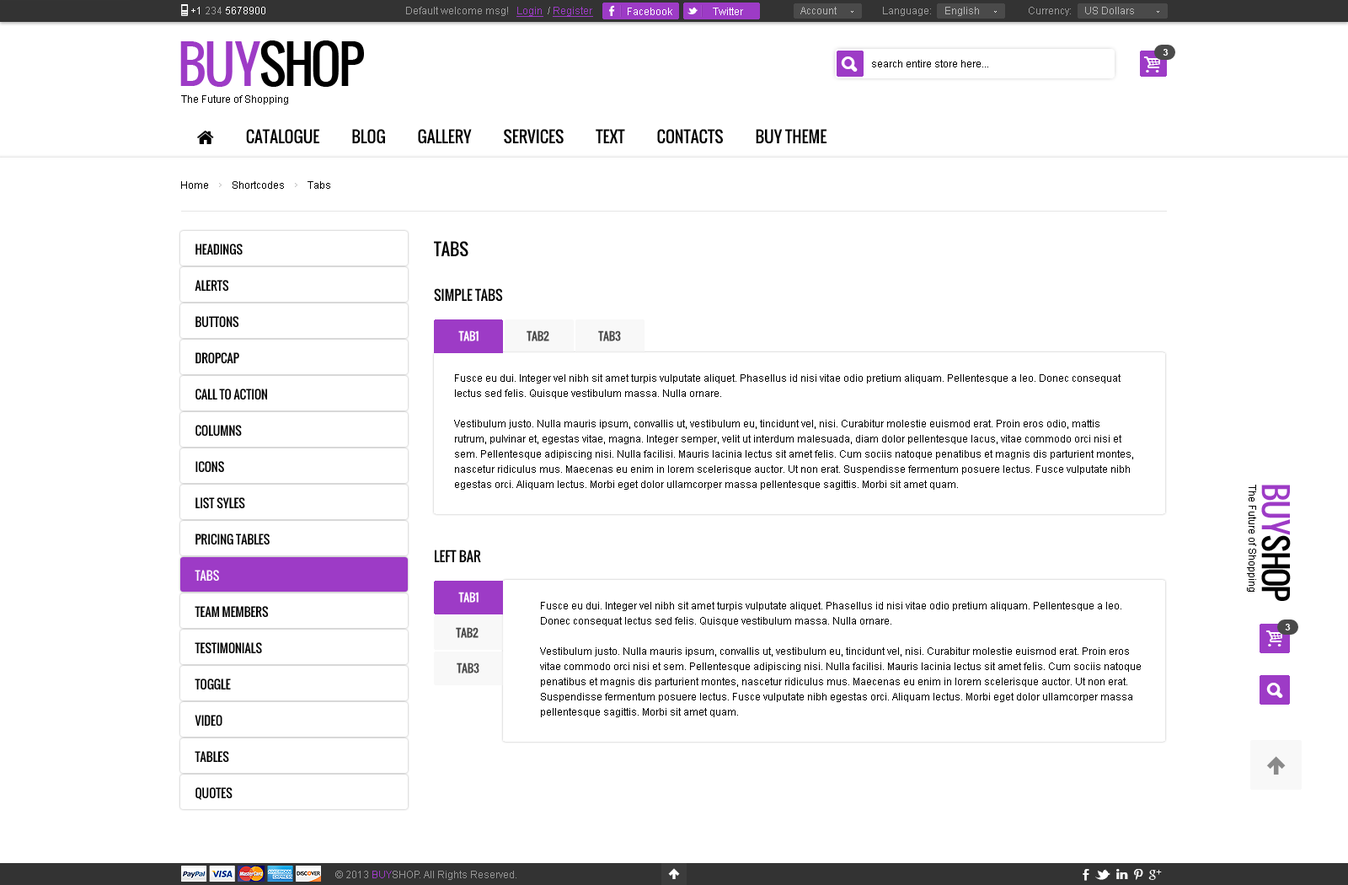
<style>
.page{position:relative;width:1348px;height:885px;background:#ffffff}
.page>*{position:absolute;margin:0}
.t1{font:10.1px "ArialMT";color:#ffffff}
.t2{font:10.1px "ArialMT";color:#9b9b9b}
.t3{font:10.1px "ArialMT";color:#9d3bc6;text-decoration:underline}
.t4{font:10.1px "ArialMT";color:#b6b6b6}
.t5{font:50.5px "Oswald";letter-spacing:-0.06em;color:#000000;text-transform:uppercase}
.t6{font:50.5px "Oswald";letter-spacing:-0.06em;color:#9d3bc6;text-transform:uppercase}
.t7{font:9.3px "Arial-BoldMT";color:#ffffff;text-transform:uppercase}
.t8{font:10.1px "ArialMT";color:#000000}
.t9{font:11.8px/36.2px "Oswald";color:#000000;text-transform:uppercase}
.t10{font:11.8px/36.2px "Oswald";color:#ffffff;text-transform:uppercase}
.t11{font:16.8px "Oswald";color:#000000;text-transform:uppercase}
.t12{font:13.5px "Oswald";color:#000000;text-transform:uppercase}
.t13{font:11px "Oswald";color:#ffffff;text-transform:uppercase}
.t14{font:11px "Oswald";color:#484848;text-transform:uppercase}
.t15{font:10.1px/15.2px "ArialMT";color:#000000}
.t16{font:32px "Oswald";letter-spacing:-0.06em;color:#000000;text-transform:uppercase}
.t17{font:32px "Oswald";letter-spacing:-0.06em;color:#9d3bc6;text-transform:uppercase}
.t18{font:10.1px "ArialMT";color:#959595}
.t19{font:10.1px "ArialMT";color:#9d3bc6}
</style>
<div class="page">
<p class="t1" style="left:191px;top:7px;width:74px;height:7px">+1 <span class="t2">234 </span>5678900</p>
<p class="t2" style="left:406px;top:7px;width:187px;height:10px">Default welcome msg!   <span class="t3">Login </span> / <span class="t3">Register</span></p>
<p class="t2" style="left:406px;top:7px;width:187px;height:10px">Default welcome msg!   <span class="t3">Login </span> / <span class="t3">Register</span></p>
<p class="t1" style="left:628px;top:8px;width:44px;height:7px">Facebook</p>
<p class="t1" style="left:713px;top:8px;width:30px;height:7px">Twitter</p>
<p class="t4" style="left:800px;top:7px;width:37px;height:7px">Account</p>
<p class="t2" style="left:883px;top:7px;width:96px;height:9px">Language:     <span class="t4">English</span></p>
<p class="t4" style="left:1029px;top:7px;width:105px;height:9px"><span class="t2">Currency:     </span>US Dollars</p>
<p class="t5" style="left:180px;top:40px;width:184px;height:47px"><span class="t6">buy</span>shop</p>
<p class="t7" style="left:1163px;top:49px;width:6px;height:7px">3</p>
<p class="t8" style="left:872px;top:60px;width:116px;height:7px">search entire store here...</p>
<p class="t8" style="left:181px;top:95px;width:107px;height:9px">The Future of Shopping</p>
<p class="t8" style="left:181px;top:181px;width:149px;height:8px">Home         Shortcodes         Tabs</p>
<p class="t9" style="left:195px;top:243px;width:75px;height:557px">Headings<br>Alerts<br>Buttons<br>Dropcap<br>Call To Action<br>Columns<br>Icons<br>List syles<br>Pricing Tables<br><span class="t10">Tabs<br></span>Team Members<br>Testimonials<br>Toggle<br>Video<br>Tables<br>Quotes</p>
<p class="t11" style="left:434px;top:241px;width:34px;height:16px">tabs</p>
<p class="t12" style="left:434px;top:288px;width:69px;height:14px">SIMPLE TABS</p>
<p class="t13" style="left:458px;top:330px;width:21px;height:11px">TAB1</p>
<p class="t14" style="left:527px;top:330px;width:22px;height:11px">TAB2</p>
<p class="t14" style="left:598px;top:330px;width:23px;height:11px">TAB3</p>
<p class="t15" style="left:454px;top:374px;width:679px;height:115px">Fusce eu dui. Integer vel nibh sit amet turpis vulputate aliquet. Phasellus id nisi vitae odio pretium aliquam. Pellentesque a leo. Donec consequat lectus sed felis. Quisque vestibulum massa. Nulla ornare.  <br><br>Vestibulum justo. Nulla mauris ipsum, convallis ut, vestibulum eu, tincidunt vel, nisi. Curabitur molestie euismod erat. Proin eros odio, mattis rutrum, pulvinar et, egestas vitae, magna. Integer semper, velit ut interdum malesuada, diam dolor pellentesque lacus, vitae commodo orci nisi et sem. Pellentesque adipiscing nisi. Nulla facilisi. Mauris lacinia lectus sit amet felis. Cum sociis natoque penatibus et magnis dis parturient montes, nascetur ridiculus mus. Maecenas eu enim in lorem scelerisque auctor. Ut non erat. Suspendisse fermentum posuere lectus. Fusce vulputate nibh egestas orci. Aliquam lectus. Morbi eget dolor ullamcorper massa pellentesque sagittis. Morbi sit amet quam.</p>
<p class="t8" style="left:1247px;top:484px;width:9px;height:107px;rotate:90deg">The Future of Shopping</p>
<p class="t16" style="left:1261px;top:484px;width:30px;height:117px;rotate:90deg"><span class="t17">buy</span>shop</p>
<p class="t12" style="left:435px;top:549px;width:46px;height:13px">LEFT BAR</p>
<p class="t13" style="left:458px;top:591px;width:21px;height:11px">TAB1</p>
<p class="t15" style="left:540px;top:602px;width:601px;height:115px">Fusce eu dui. Integer vel nibh sit amet turpis vulputate aliquet. Phasellus id nisi vitae odio pretium aliquam. Pellentesque a leo. Donec consequat lectus sed felis. Quisque vestibulum massa. Nulla ornare.  <br><br>Vestibulum justo. Nulla mauris ipsum, convallis ut, vestibulum eu, tincidunt vel, nisi. Curabitur molestie euismod erat. Proin eros vitae commodo orci nisi et sem. Pellentesque adipiscing nisi. Nulla facilisi. Mauris lacinia lectus sit amet felis. Cum sociis natoque penatibus et magnis dis parturient montes, nascetur ridiculus mus. Maecenas eu enim in lorem scelerisque auctor. Ut non erat. Suspendisse fermentum posuere lectus. Fusce vulputate nibh egestas orci. Aliquam lectus. Morbi eget dolor ullamcorper massa pellentesque sagittis. Morbi sit amet quam.</p>
<p class="t14" style="left:456px;top:627px;width:23px;height:11px">TAB2</p>
<p class="t7" style="left:1285px;top:623px;width:6px;height:7px">3</p>
<p class="t14" style="left:457px;top:662px;width:22px;height:11px">TAB3</p>
<p class="t18" style="left:335px;top:870px;width:181px;height:10px">© 2013 <span class="t19">BUY</span>SHOP. All Rights Reserved.</p>
</div>
